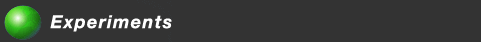
<style>
.page{position:relative;width:481px;height:42px;background:#333333}
.page>*{position:absolute;margin:0}
.t1{font:18px "HelveticaNeue-BoldItalic";letter-spacing:0.075em;color:#ffffff}
</style>
<div class="page">
<p class="t1" style="left:50px;top:15px;width:122px;height:17px">Experiments</p>
</div>
